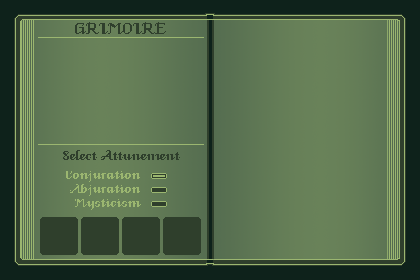
<style>
.page{position:relative;width:420px;height:280px}
.page>*{position:absolute;margin:0}
.t1{font:21.3px "VeniceClassic";color:#2f3f2c}
.t2{font:17.3px "VeniceClassic";color:#2f3f2c}
.t3{font:16px "VeniceClassic";color:#9bb670}
</style>
<div class="page">
<p class="t1" style="left:75px;top:22px;width:91px;height:12px">GRIMOIRE</p>
<p class="t2" style="left:63px;top:150px;width:117px;height:10px">Select Attunement</p>
<p class="t3" style="left:66px;top:171px;width:74px;height:11px">Conjuration</p>
<p class="t3" style="left:70px;top:184px;width:70px;height:12px">Abjuration</p>
<p class="t3" style="left:75px;top:199px;width:66px;height:11px">Mysticism</p>
</div>
